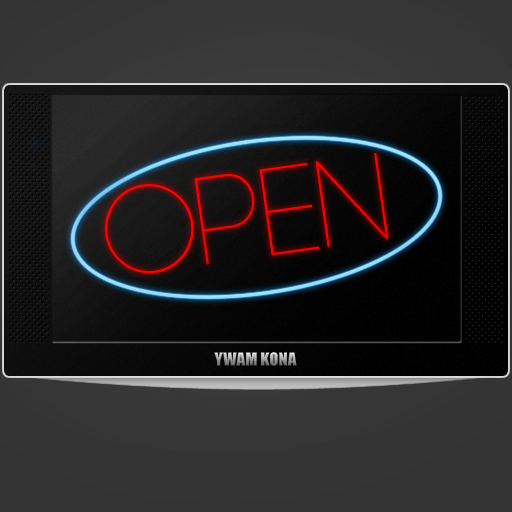
<style>
.page{position:relative;width:512px;height:512px}
.page>*{position:absolute;margin:0}
.t1{font:123.5px "Code-Light";color:#ff0000}
.t2{font:17px "Impact";text-transform:uppercase}
</style>
<div class="page">
<p class="t1" style="left:105px;top:153px;width:284px;height:121px;rotate:-8deg">Open</p>
<p class="t2" style="left:214px;top:352px;width:83px;height:15px">ywam Kona</p>
</div>
